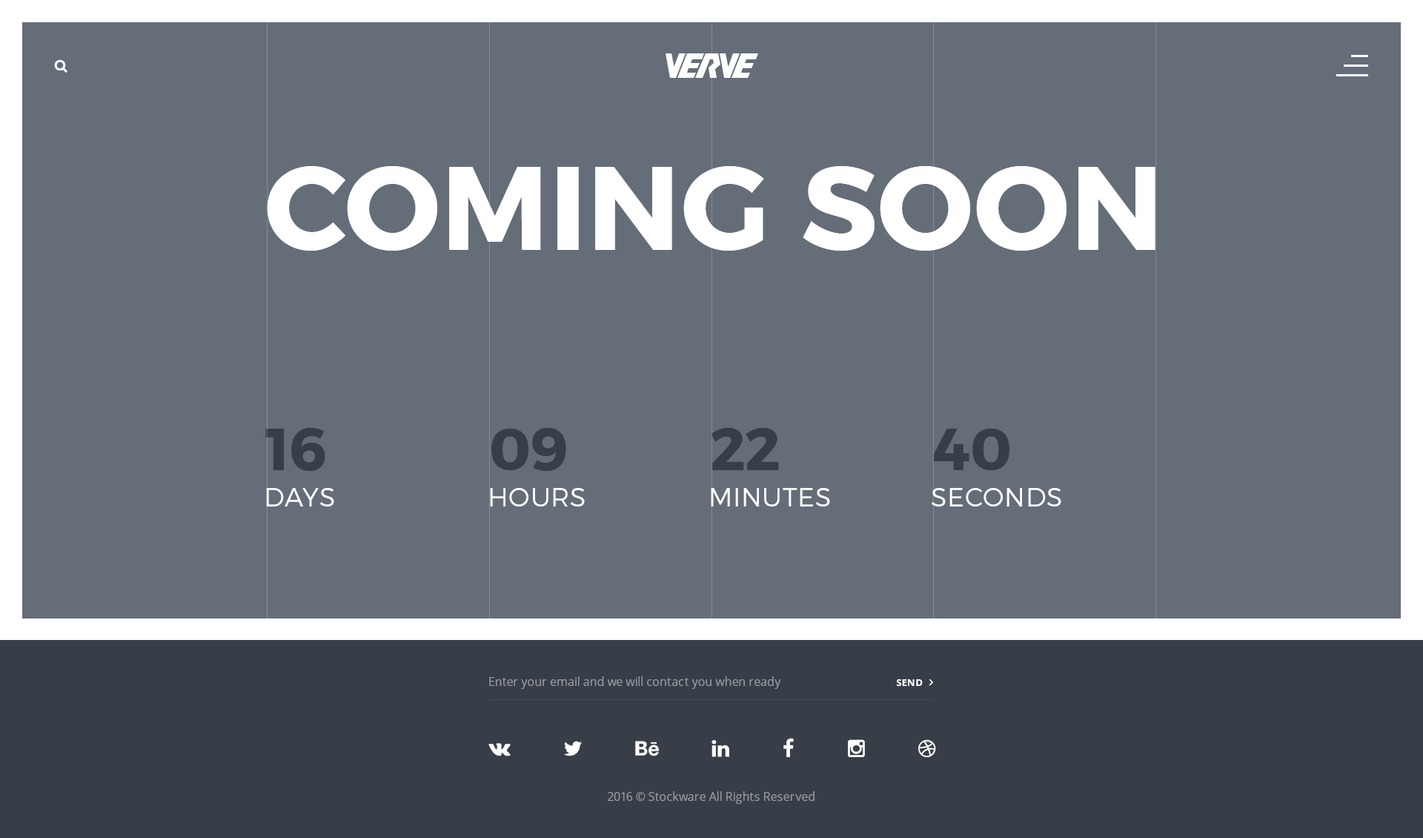
<style>
.page{position:relative;width:1423px;height:838px;background:#656d79}
.page>*{position:absolute;margin:0}
.t1{font:118.6px "Montserrat-Bold";letter-spacing:0.02em;color:#ffffff;text-transform:uppercase}
.t2{font:59.3px "Montserrat-Bold";letter-spacing:0.02em;color:#383e48;text-transform:uppercase}
.t3{font:25.9px "Montserrat-Light";letter-spacing:0.02em;color:#ffffff;text-transform:uppercase}
.t4{font:11.9px "OpenSans";color:#969aa1}
.t5{font:9.6px "OpenSans-Bold";letter-spacing:0.02em;color:#ffffff;text-transform:uppercase}
</style>
<div class="page">
<p class="t1" style="left:267px;top:166px;width:889px;height:85px">coming soon</p>
<p class="t2" style="left:265px;top:428px;width:60px;height:43px">16</p>
<p class="t2" style="left:492px;top:428px;width:74px;height:43px">09</p>
<p class="t2" style="left:711px;top:427px;width:68px;height:43px">22</p>
<p class="t2" style="left:934px;top:429px;width:76px;height:41px">40</p>
<p class="t3" style="left:266px;top:488px;width:68px;height:18px">days</p>
<p class="t3" style="left:490px;top:488px;width:95px;height:18px">hours</p>
<p class="t3" style="left:711px;top:488px;width:119px;height:18px">minutes</p>
<p class="t3" style="left:932px;top:488px;width:130px;height:18px">seconds</p>
<p class="t4" style="left:489px;top:676px;width:292px;height:13px">Enter your email and we will contact you when ready</p>
<p class="t5" style="left:897px;top:679px;width:26px;height:7px">send</p>
<p class="t4" style="left:608px;top:791px;width:207px;height:13px">2016 © Stockware All Rights Reserved</p>
</div>
